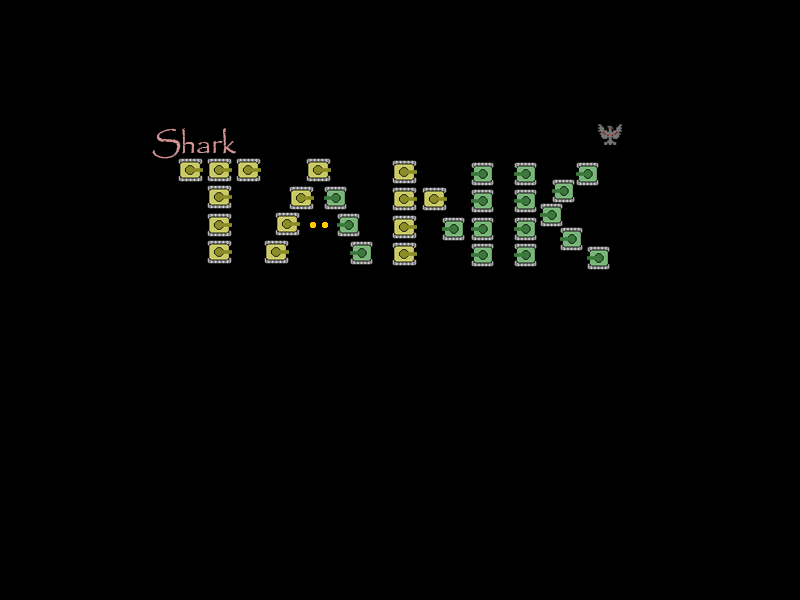
<style>
.page{position:relative;width:800px;height:600px;background:#000000}
.page>*{position:absolute;margin:0}
.t1{font:30px "Papyrus-Regular";color:#d79797}
</style>
<div class="page">
<p class="t1" style="left:152px;top:128px;width:84px;height:31px">Shark</p>
</div>
